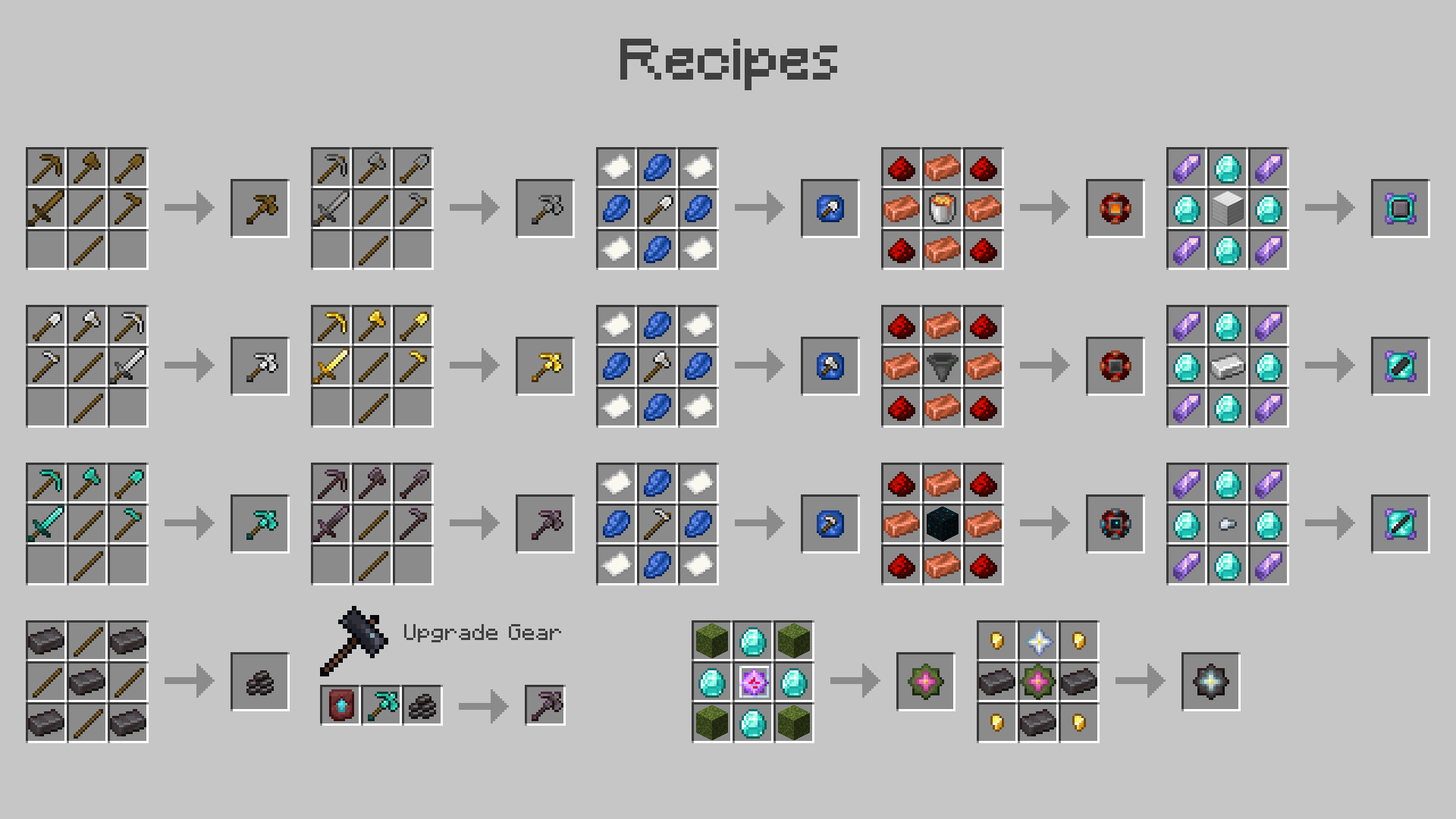
<style>
.page{position:relative;width:1456px;height:819px;background:#c6c6c6}
.page>*{position:absolute;margin:0}
.t1{font:54.6px "Minecraft";letter-spacing:0.025em;color:#3f3f3f}
</style>
<div class="page">
<p class="t1" style="left:620px;top:39px;width:217px;height:51px">Recipes</p>
</div>
